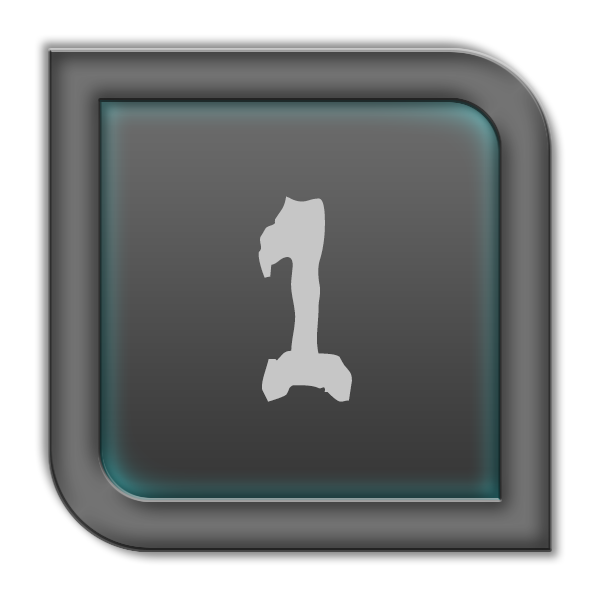
<style>
.page{position:relative;width:600px;height:600px;background:#ffffff}
.page>*{position:absolute;margin:0}
.t1{font:240px "GoreFontII";color:#c6c6c6;scale:0.83 1}
</style>
<div class="page">
<p class="t1" style="left:258px;top:196px;width:94px;height:206px">1</p>
</div>
